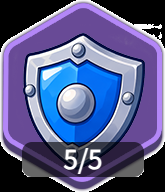
<style>
.page{position:relative;width:165px;height:192px}
.page>*{position:absolute;margin:0}
.t1{font:26px "WebPSD-18463539-0-Regular";color:#ffffff;font-weight:bold}
</style>
<div class="page">
<p class="t1" style="left:22px;top:142px;width:122px;height:35px">5/5</p>
</div>
